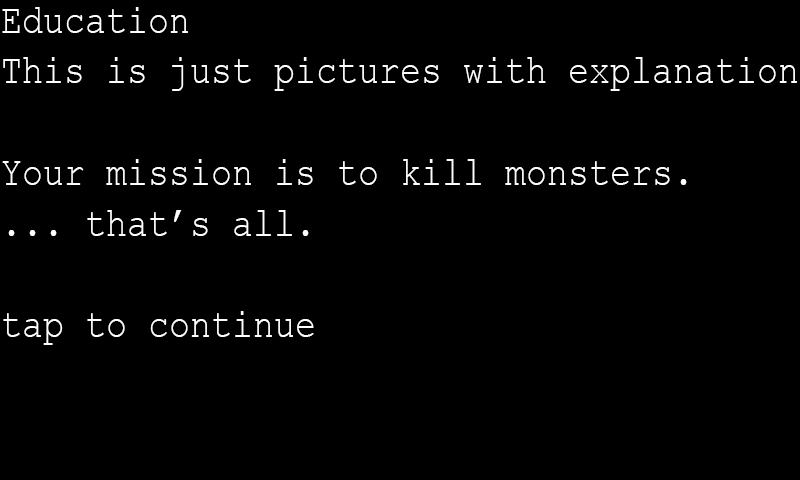
<style>
.page{position:relative;width:800px;height:480px;background:#000000}
.page>*{position:absolute;margin:0}
.t1{font:42.3px "CourierNewPSMT";color:#ffffff;scale:0.83 1}
</style>
<div class="page">
<p class="t1" style="left:2px;top:7px;width:795px;height:338px">Education<br>This is just pictures with explanation<br><br>Your mission is to kill monsters.<br>... that’s all.<br><br>tap to continue</p>
</div>
